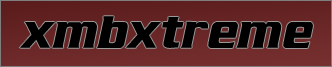
<style>
.page{position:relative;width:332px;height:67px}
.page>*{position:absolute;margin:0}
.t1{font:76px "AirMillhouseItalic";color:#000000}
</style>
<div class="page">
<p class="t1" style="left:19px;top:16px;width:294px;height:32px">xmbxtreme</p>
</div>
